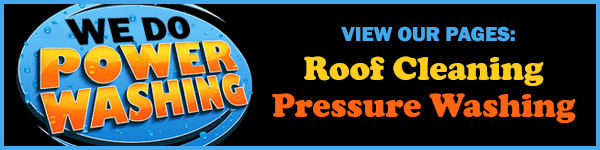
<style>
.page{position:relative;width:600px;height:150px;background:#000000}
.page>*{position:absolute;margin:0}
.t1{font:20.9px "FranklinGothic-Heavy";color:#43a9ec}
.t2{font:33.8px/37.2px "CooperBlack";color:#ff6512}
.t3{font:33.8px/29.8px "CooperBlack";color:#ffcd1d}
</style>
<div class="page">
<p class="t1" style="left:341px;top:26px;width:174px;height:16px">VIEW OUR PAGES:</p>
<p class="t2" style="left:272px;top:56px;width:304px;height:67px;text-align:center"><span class="t3">Roof Cleaning<br></span>Pressure Washing</p>
</div>
